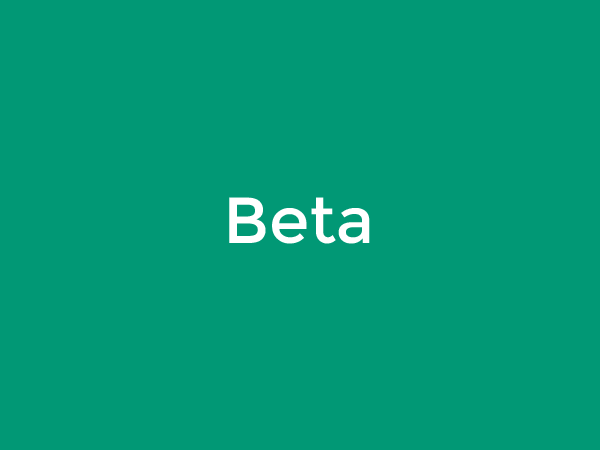
<style>
.page{position:relative;width:600px;height:450px;background:#019875}
.page>*{position:absolute;margin:0}
.t1{font:65px "Montserrat-Regular";color:#ffffff}
</style>
<div class="page">
<p class="t1" style="left:229px;top:197px;width:141px;height:47px">Beta</p>
</div>
